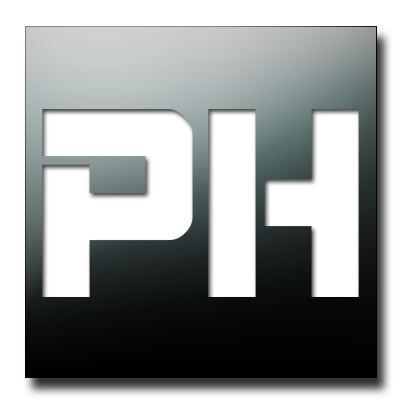
<style>
.page{position:relative;width:400px;height:400px;background:#ffffff}
.page>*{position:absolute;margin:0}
.t1{font:299px "ARDESTINE";letter-spacing:-0.01em;color:#ffffff;text-transform:uppercase}
</style>
<div class="page">
<p class="t1" style="left:42px;top:109px;width:317px;height:188px">PH</p>
</div>
